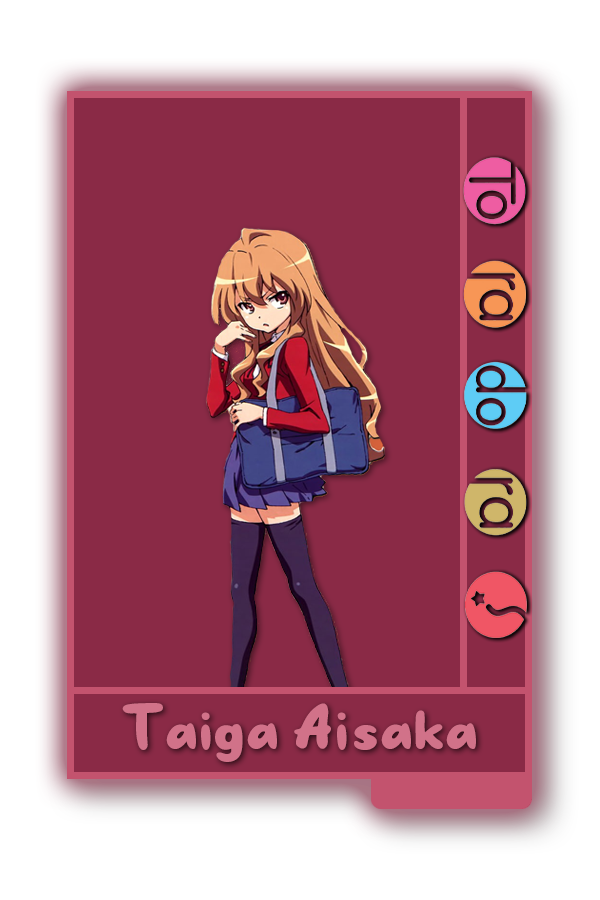
<style>
.page{position:relative;width:600px;height:900px;background:#8a2a46}
.page>*{position:absolute;margin:0}
.t1{font:66.1px "Go-Mocha";color:#d17289;scale:1.08 1}
</style>
<div class="page">
<p class="t1" style="left:122px;top:703px;width:354px;height:59px">Taiga Aisaka</p>
</div>
